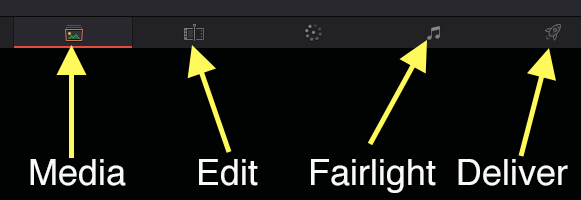
<style>
.page{position:relative;width:581px;height:200px;background:#010202}
.page>*{position:absolute;margin:0}
.t1{font:36px "Helvetica";color:#f9f9f9}
</style>
<div class="page">
<p class="t1" style="left:30px;top:159px;width:538px;height:34px">Media       Edit     Fairlight  Deliver</p>
</div>
